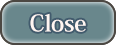
<style>
.page{position:relative;width:116px;height:45px;background:#69878c}
.page>*{position:absolute;margin:0}
.t1{font:24px "HeiseiMinStd-W7";color:#fff6f2}
</style>
<div class="page">
<p class="t1" style="left:30px;top:13px;width:56px;height:19px">Close</p>
</div>
